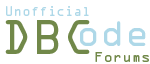
<style>
.page{position:relative;width:150px;height:64px;background:#ffffff}
.page>*{position:absolute;margin:0}
.t1{font:11.9px "OCRAStd";color:#aed8e8}
.t2{font:43.3px "OCRAStd";color:#718849}
.t3{font:34px "OCRAStd";color:#aed8e8}
.t4{font:13px "OCRAStd";color:#718849}
</style>
<div class="page">
<p class="t1" style="left:6px;top:6px;width:83px;height:10px">Unofficial</p>
<p class="t2" style="left:5px;top:20px;width:85px;height:34px">DBC</p>
<p class="t3" style="left:80px;top:21px;width:66px;height:25px">ode</p>
<p class="t4" style="left:95px;top:52px;width:54px;height:10px">Forums</p>
</div>
